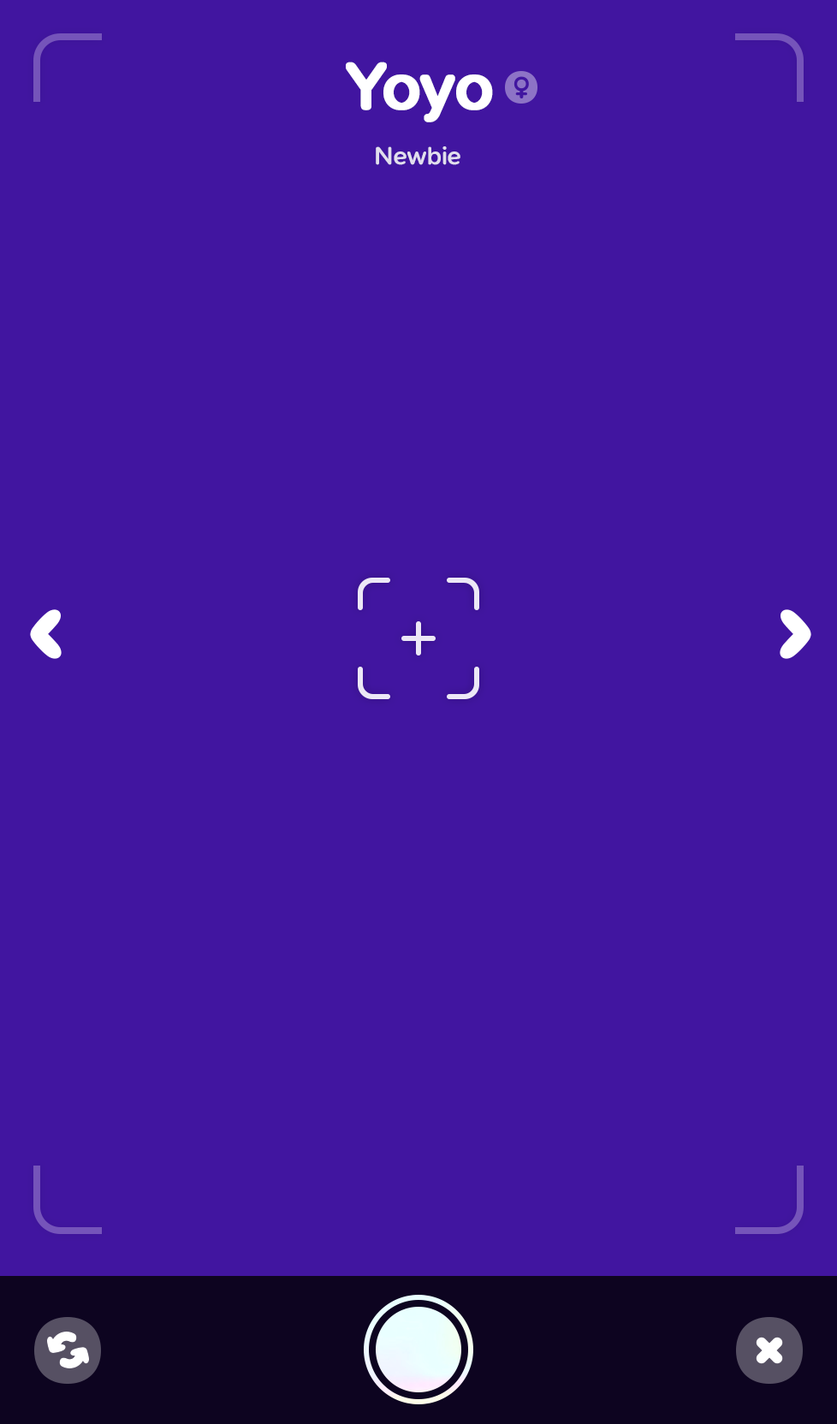
<style>
.page{position:relative;width:837px;height:1424px;background:#4115a0}
.page>*{position:absolute;margin:0}
.t1{font:68.5px "SNPro-SemiBold";letter-spacing:-0.01em;color:#ffffff;font-weight:bold}
.t2{font:25.7px "SNPro-SemiBold";letter-spacing:-0.01em;color:#e2deee}
</style>
<div class="page">
<p class="t1" style="left:346px;top:62px;width:147px;height:60px">Yoyo</p>
<p class="t2" style="left:376px;top:146px;width:85px;height:19px">Newbie</p>
</div>
